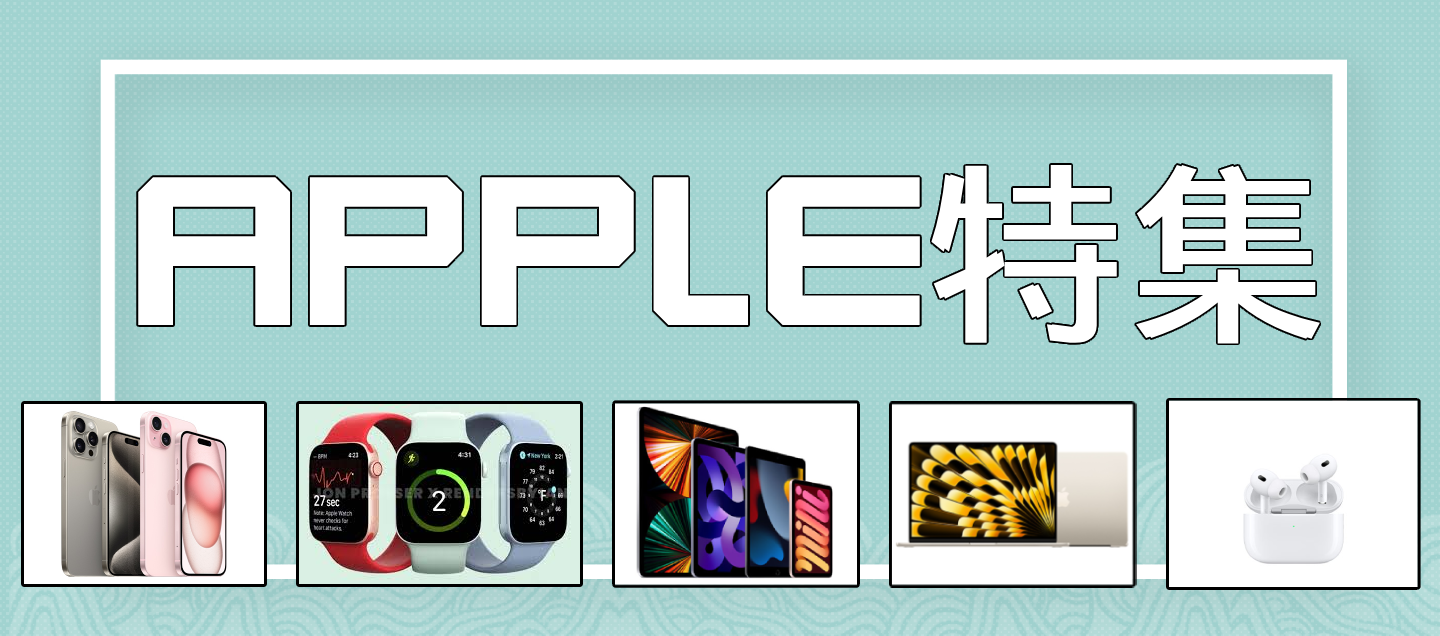
<style>
.page{position:relative;width:1440px;height:636px;background:#ffffff}
.page>*{position:absolute;margin:0}
.t1{font:197.1px "Karnivore";color:#ffffff;font-weight:bold}
.t2{font:197.1px "DroidSansFallback";color:#ffffff;font-weight:bold}
</style>
<div class="page">
<p class="t1" style="left:138px;top:164px;width:1182px;height:180px">APPLE<span class="t2">特集</span></p>
</div>
